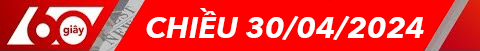
<style>
.page{position:relative;width:480px;height:51px;background:#ff0000}
.page>*{position:absolute;margin:0}
.t1{font:30px "AvenirNext-BoldItalic";color:#fefefe}
</style>
<div class="page">
<p class="t1" style="left:146px;top:8px;width:278px;height:32px">CHIỀU 30/04/2024</p>
</div>
